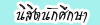
<style>
.page{position:relative;width:100px;height:25px;background:#a6f1ee}
.page>*{position:absolute;margin:0}
.t1{font:20px "CSCheangkhan";color:#030508}
</style>
<div class="page">
<p class="t1" style="left:16px;top:4px;width:72px;height:19px">นิสิตนักศึกษา</p>
</div>
